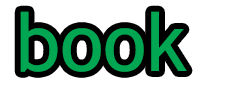
<style>
.page{position:relative;width:239px;height:108px;background:#ffffff}
.page>*{position:absolute;margin:0}
.t1{font:80px "TrebuchetMS";color:#00a651}
</style>
<div class="page">
<p class="t1" style="left:20px;top:11px;width:167px;height:61px">book</p>
</div>
